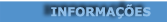
<style>
.page{position:relative;width:167px;height:22px;background:#5292cc}
.page>*{position:absolute;margin:0}
.t1{font:12px "Verdana-Bold";color:#8fbee8}
</style>
<div class="page">
<p class="t1" style="left:51px;top:4px;width:100px;height:15px">INFORMAÇÕES</p>
</div>
